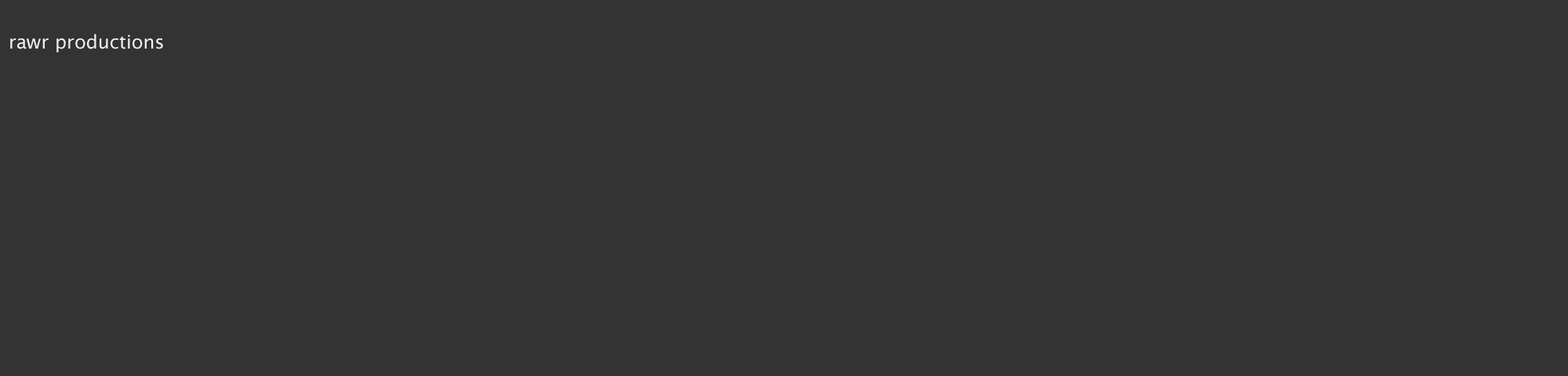
<style>
.page{position:relative;width:1568px;height:376px;background:#333333}
.page>*{position:absolute;margin:0}
.t1{font:18.8px "LucidaSans";color:#f1f1f1}
</style>
<div class="page">
<p class="t1" style="left:10px;top:34px;width:153px;height:19px">rawr productions</p>
</div>
